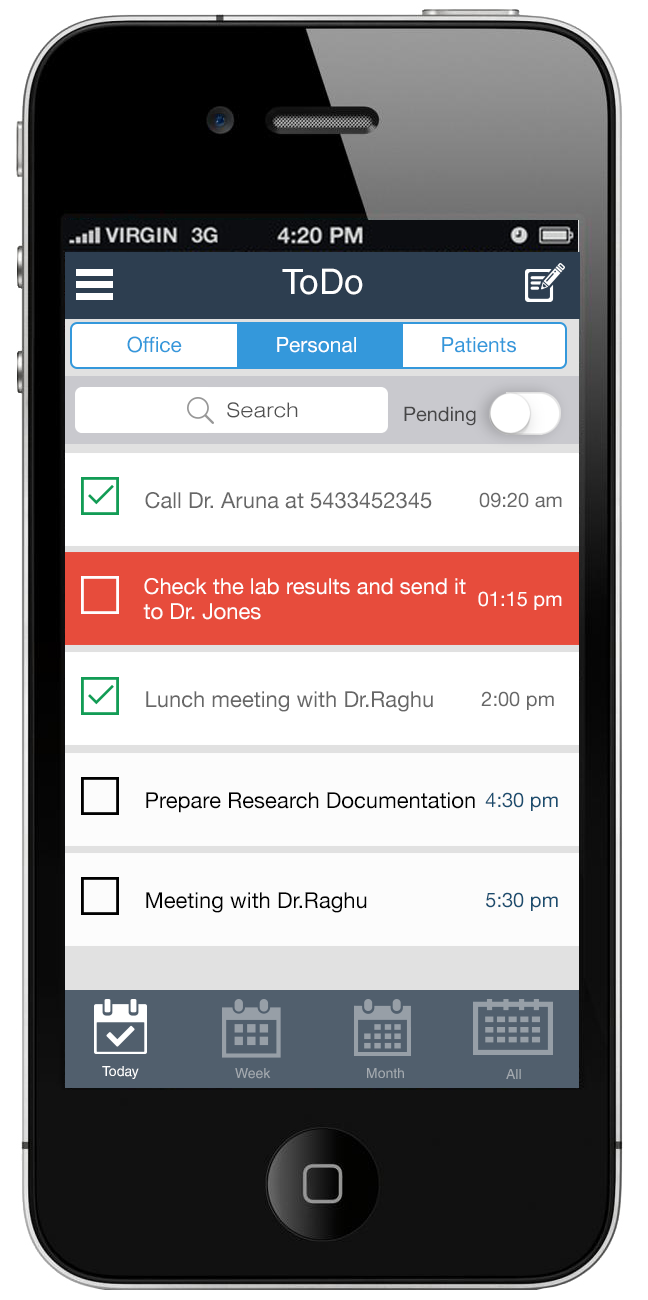
<style>
.page{position:relative;width:648px;height:1300px;background:#ffffff}
.page>*{position:absolute;margin:0}
.t1{font:35px "HelveticaLT";color:#ffffff}
.t2{font:21.1px "HelveticaNeue";color:#3498db}
.t3{font:21.1px "HelveticaNeue";color:#ffffff}
.t4{font:20px "Swiss721BT-LightExtended";color:#505050}
.t5{font:20px "HelveticaNeue";color:#2f2f2f}
.t6{font:22px "HelveticaNeue";color:#676767}
.t7{font:20px "HelveticaNeue";color:#676767}
.t8{font:20px "HelveticaNeue";color:#676767;text-transform:uppercase}
.t9{font:22px/25px "HelveticaNeue";color:#ffffff}
.t10{font:20px "HelveticaNeue";color:#ffffff}
.t11{font:20px "HelveticaNeue";color:#ffffff;text-transform:uppercase}
.t12{font:22px "HelveticaNeue";color:#000000}
.t13{font:20px "HelveticaNeue";color:#1b4d6f;text-transform:uppercase}
.t14{font:20px "HelveticaNeue";color:#1b4d6f}
.t15{font:14px "HelveticaLT";color:#ffffff}
.t16{font:14px "HelveticaLT";color:#a4aab0}
</style>
<div class="page">
<p class="t1" style="left:282px;top:268px;width:81px;height:27px">ToDo</p>
<p class="t2" style="left:127px;top:336px;width:55px;height:17px">Office</p>
<p class="t3" style="left:277px;top:337px;width:79px;height:16px">Personal</p>
<p class="t2" style="left:442px;top:337px;width:74px;height:16px">Patients</p>
<p class="t4" style="left:227px;top:402px;width:71px;height:16px">Search</p>
<p class="t5" style="left:404px;top:406px;width:72px;height:20px;opacity:0.9">Pending</p>
<p class="t6" style="left:145px;top:492px;width:287px;height:17px">Call Dr. Aruna at 5433452345</p>
<p class="t7" style="left:479px;top:492px;width:83px;height:16px"><span class="t8"> </span>09:20 am</p>
<p class="t9" style="left:143px;top:578px;width:323px;height:42px">Check the lab results and send it to Dr. Jones</p>
<p class="t10" style="left:478px;top:591px;width:84px;height:19px"><span class="t11">01</span>:15 pm</p>
<p class="t6" style="left:146px;top:691px;width:287px;height:21px">Lunch meeting with Dr.Raghu</p>
<p class="t7" style="left:481px;top:691px;width:73px;height:19px">2:00 pm</p>
<p class="t12" style="left:146px;top:792px;width:329px;height:21px">Prepare Research Documentation</p>
<p class="t13" style="left:485px;top:792px;width:73px;height:19px">4:30<span class="t14"> pm</span></p>
<p class="t12" style="left:146px;top:892px;width:221px;height:21px">Meeting with Dr.Raghu</p>
<p class="t13" style="left:486px;top:892px;width:72px;height:19px">5:30<span class="t14"> pm</span></p>
<p class="t15" style="left:102px;top:1066px;width:37px;height:13px">Today</p>
<p class="t16" style="left:235px;top:1068px;width:36px;height:11px">Week</p>
<p class="t16" style="left:367px;top:1068px;width:37px;height:11px">Month</p>
<p class="t16" style="left:506px;top:1069px;width:15px;height:10px">All</p>
</div>
